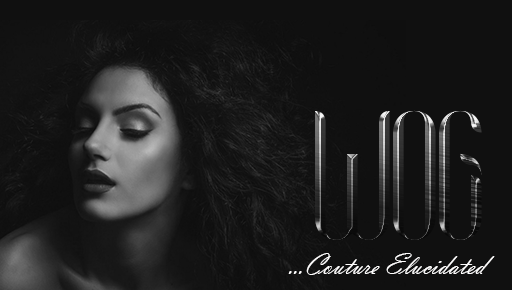
<style>
.page{position:relative;width:512px;height:290px;background:#101010}
.page>*{position:absolute;margin:0}
.t1{font:150px "Coco-Regular";letter-spacing:-0.02em}
.t2{font:30px "VladimirScript";letter-spacing:-0.02em;color:#fefdfd}
</style>
<div class="page">
<p class="t1" style="left:315px;top:110px;width:167px;height:130px">WOG</p>
<p class="t2" style="left:288px;top:253px;width:207px;height:22px">...Couture Elucidated</p>
</div>
